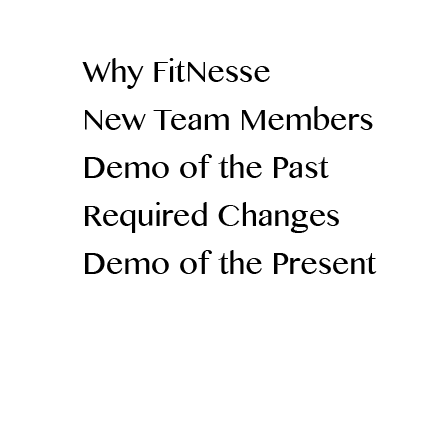
<style>
.page{position:relative;width:436px;height:436px;background:#ffffff}
.page>*{position:absolute;margin:0}
.t1{font:30px/48px "TamilMN";color:#000000}
</style>
<div class="page">
<p class="t1" style="left:82px;top:58px;width:295px;height:216px">Why FitNesse<br>New Team Members<br>Demo of the Past<br>Required Changes<br>Demo of the Present</p>
</div>
